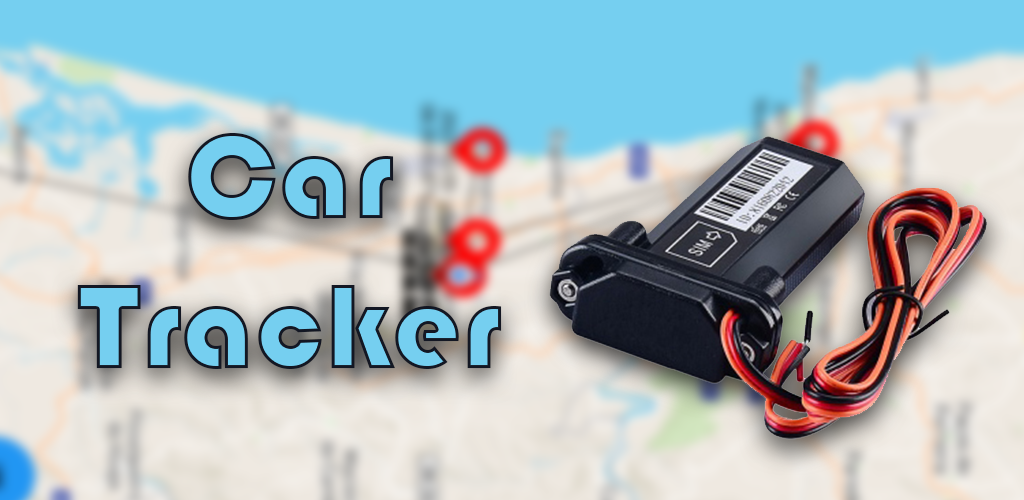
<style>
.page{position:relative;width:1024px;height:500px;background:#75cff0}
.page>*{position:absolute;margin:0}
.t1{font:125px "Bauhaus93";color:#75cff0}
</style>
<div class="page">
<p class="t1" style="left:77px;top:133px;width:425px;height:236px;text-align:center">Car Tracker</p>
</div>
